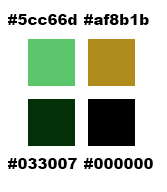
<style>
.page{position:relative;width:167px;height:192px;background:#ffffff}
.page>*{position:absolute;margin:0}
.t1{font:15px "Arial-Black";color:#000000}
</style>
<div class="page">
<p class="t1" style="left:8px;top:14px;width:69px;height:11px">#5cc66d</p>
<p class="t1" style="left:84px;top:14px;width:65px;height:11px">#af8b1b</p>
<p class="t1" style="left:8px;top:158px;width:69px;height:11px">#033007</p>
<p class="t1" style="left:84px;top:158px;width:69px;height:11px">#000000</p>
</div>
